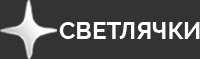
<style>
.page{position:relative;width:200px;height:59px;background:#333333}
.page>*{position:absolute;margin:0}
.t1{font:24px "Raleway-Bold";color:#ffffff}
</style>
<div class="page">
<p class="t1" style="left:59px;top:22px;width:141px;height:17px">СВЕТЛЯЧКИ</p>
</div>
